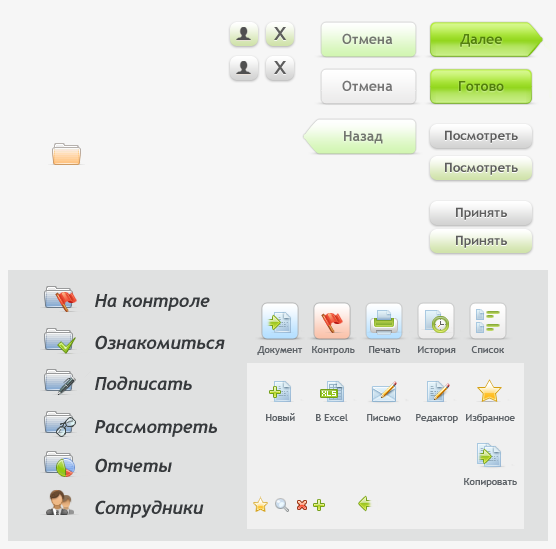
<style>
.page{position:relative;width:556px;height:549px;background:#f6f6f6}
.page>*{position:absolute;margin:0}
.t1{font:14px "TrebuchetMS-Bold";color:#73766f}
.t2{font:14px "TrebuchetMS-Bold";color:#52800a}
.t3{font:14px "TrebuchetMS-Bold";color:#757575}
.t4{font:14px "TrebuchetMS-Bold";color:#51800a}
.t5{font:14px "TrebuchetMS-Bold";color:#72766f}
.t6{font:13px "TrebuchetMS-Bold"}
.t7{font:13px "TrebuchetMS-Bold";color:#5f5f5f}
.t8{font:18px "Trebuchet-BoldItalic";color:#36393c}
.t9{font:10px "TrebuchetMS";color:#5f6469}
</style>
<div class="page">
<p class="t1" style="left:342px;top:33px;width:51px;height:11px">Отмена</p>
<p class="t2" style="left:460px;top:34px;width:42px;height:13px">Далее</p>
<p class="t3" style="left:342px;top:80px;width:51px;height:11px">Отмена</p>
<p class="t4" style="left:459px;top:81px;width:45px;height:10px">Готово</p>
<p class="t5" style="left:344px;top:131px;width:39px;height:13px">Назад</p>
<p class="t6" style="left:445px;top:131px;width:73px;height:13px">Посмотреть</p>
<p class="t7" style="left:445px;top:130px;width:73px;height:13px">Посмотреть</p>
<p class="t6" style="left:445px;top:163px;width:73px;height:13px">Посмотреть</p>
<p class="t7" style="left:445px;top:162px;width:73px;height:13px">Посмотреть</p>
<p class="t6" style="left:456px;top:208px;width:51px;height:13px">Принять</p>
<p class="t7" style="left:456px;top:207px;width:51px;height:13px">Принять</p>
<p class="t6" style="left:456px;top:236px;width:51px;height:13px">Принять</p>
<p class="t7" style="left:456px;top:235px;width:51px;height:13px">Принять</p>
<p class="t8" style="left:95px;top:294px;width:115px;height:17px">На контроле</p>
<p class="t8" style="left:95px;top:335px;width:130px;height:15px">Ознакомиться</p>
<p class="t9" style="left:257px;top:346px;width:46px;height:9px">Документ</p>
<p class="t9" style="left:312px;top:346px;width:43px;height:9px">Контроль</p>
<p class="t9" style="left:369px;top:346px;width:32px;height:7px">Печать</p>
<p class="t9" style="left:418px;top:346px;width:38px;height:9px">История</p>
<p class="t9" style="left:471px;top:346px;width:33px;height:7px">Список</p>
<p class="t8" style="left:95px;top:376px;width:97px;height:14px">Подписать</p>
<p class="t9" style="left:266px;top:413px;width:29px;height:8px">Новый</p>
<p class="t9" style="left:316px;top:414px;width:32px;height:7px">В Excel</p>
<p class="t9" style="left:367px;top:414px;width:34px;height:7px">Письмо</p>
<p class="t9" style="left:416px;top:414px;width:42px;height:9px">Редактор</p>
<p class="t9" style="left:466px;top:414px;width:49px;height:9px">Избранное</p>
<p class="t8" style="left:95px;top:420px;width:122px;height:17px">Рассмотреть</p>
<p class="t8" style="left:95px;top:458px;width:77px;height:15px">Отчеты</p>
<p class="t9" style="left:464px;top:478px;width:53px;height:9px">Копировать</p>
<p class="t8" style="left:95px;top:500px;width:109px;height:18px">Сотрудники</p>
</div>
